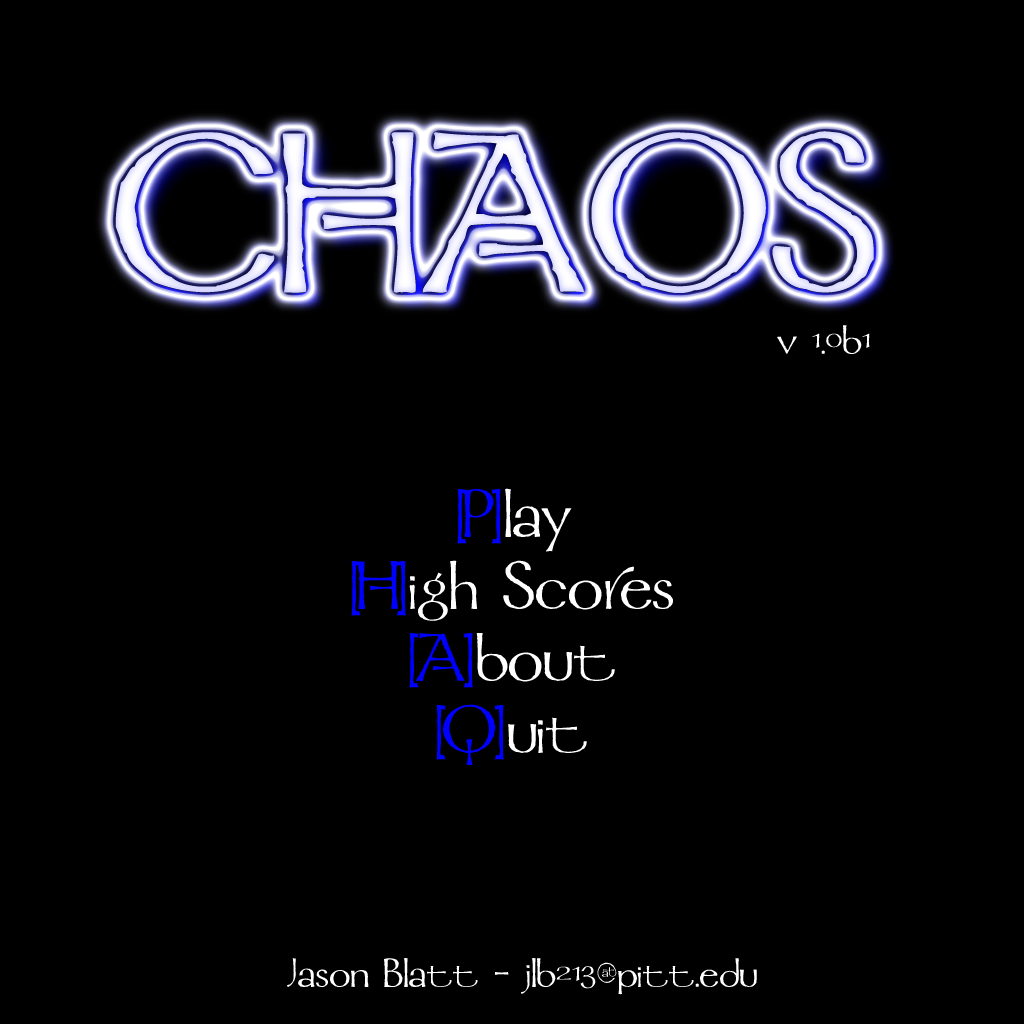
<style>
.page{position:relative;width:1024px;height:1024px;background:#000000}
.page>*{position:absolute;margin:0}
.t1{font:36px "Mordred";color:#ffffff}
.t2{font:60px "Mordred";color:#ffffff}
.t3{font:60px "Mordred";color:#0000ff}
</style>
<div class="page">
<p class="t1" style="left:777px;top:325px;width:93px;height:29px">v 1.0b1</p>
<p class="t2" style="left:351px;top:488px;width:322px;height:277px;text-align:center"><span class="t3">  [P]</span>lay<br>{{<span class="t3">[H]</span>igh Scores<br>  <span class="t3">[A]</span>bout<br>  <span class="t3">[Q]</span>uit</p>
<p class="t1" style="left:287px;top:958px;width:470px;height:37px">Jason Blatt - jlb213@pitt.edu</p>
</div>
